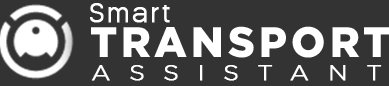
<style>
.page{position:relative;width:389px;height:86px;background:#333333}
.page>*{position:absolute;margin:0}
.t1{font:25.1px "Kamerik205-Regular6";letter-spacing:0.1em;color:#ffffff;font-weight:bold}
.t2{font:42.6px "Gotham-Black";letter-spacing:0.1em;color:#ffffff}
.t3{font:22.1px "Gotham-Light";letter-spacing:0.76em;color:#ffffff;font-weight:bold;scale:1.09 1}
</style>
<div class="page">
<p class="t1" style="left:90px;top:3px;width:80px;height:20px">Smart</p>
<p class="t2" style="left:91px;top:26px;width:299px;height:32px">TRANSPORT</p>
<p class="t3" style="left:91px;top:65px;width:291px;height:16px">ASSISTANT</p>
</div>
